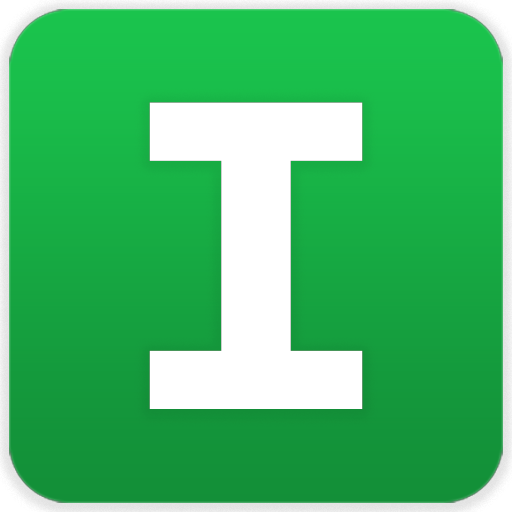
<style>
.page{position:relative;width:512px;height:512px}
.page>*{position:absolute;margin:0}
.t1{font:470px "SourceCodePro-Bold";color:#ffffff}
</style>
<div class="page">
<p class="t1" style="left:149px;top:102px;width:214px;height:307px">I</p>
</div>
